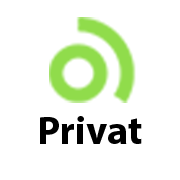
<style>
.page{position:relative;width:180px;height:180px;background:#ffffff}
.page>*{position:absolute;margin:0}
.t1{font:40px "MyriadPro-Bold";color:#000000}
</style>
<div class="page">
<p class="t1" style="left:40px;top:116px;width:102px;height:28px">Privat</p>
</div>
